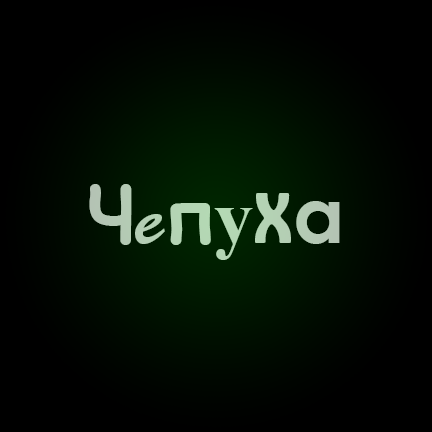
<style>
.page{position:relative;width:432px;height:432px;background:#000000}
.page>*{position:absolute;margin:0}
.t1{font:78.1px "ComicSansMS-Bold";color:#b4cfb4}
.t2{font:78.1px "BrushScriptStd";color:#b4cfb4}
.t3{font:78.1px "TimesNewRomanPS-BoldMT";color:#b4cfb4}
.t4{font:78.1px "HoboStd";color:#b4cfb4}
.t5{font:78.1px "CenturyGothic-Bold";color:#b4cfb4}
</style>
<div class="page">
<p class="t1" style="left:89px;top:184px;width:251px;height:76px">Ч<span class="t2">e</span>п<span class="t3">у</span><span class="t4">x</span><span class="t5">а</span></p>
</div>
